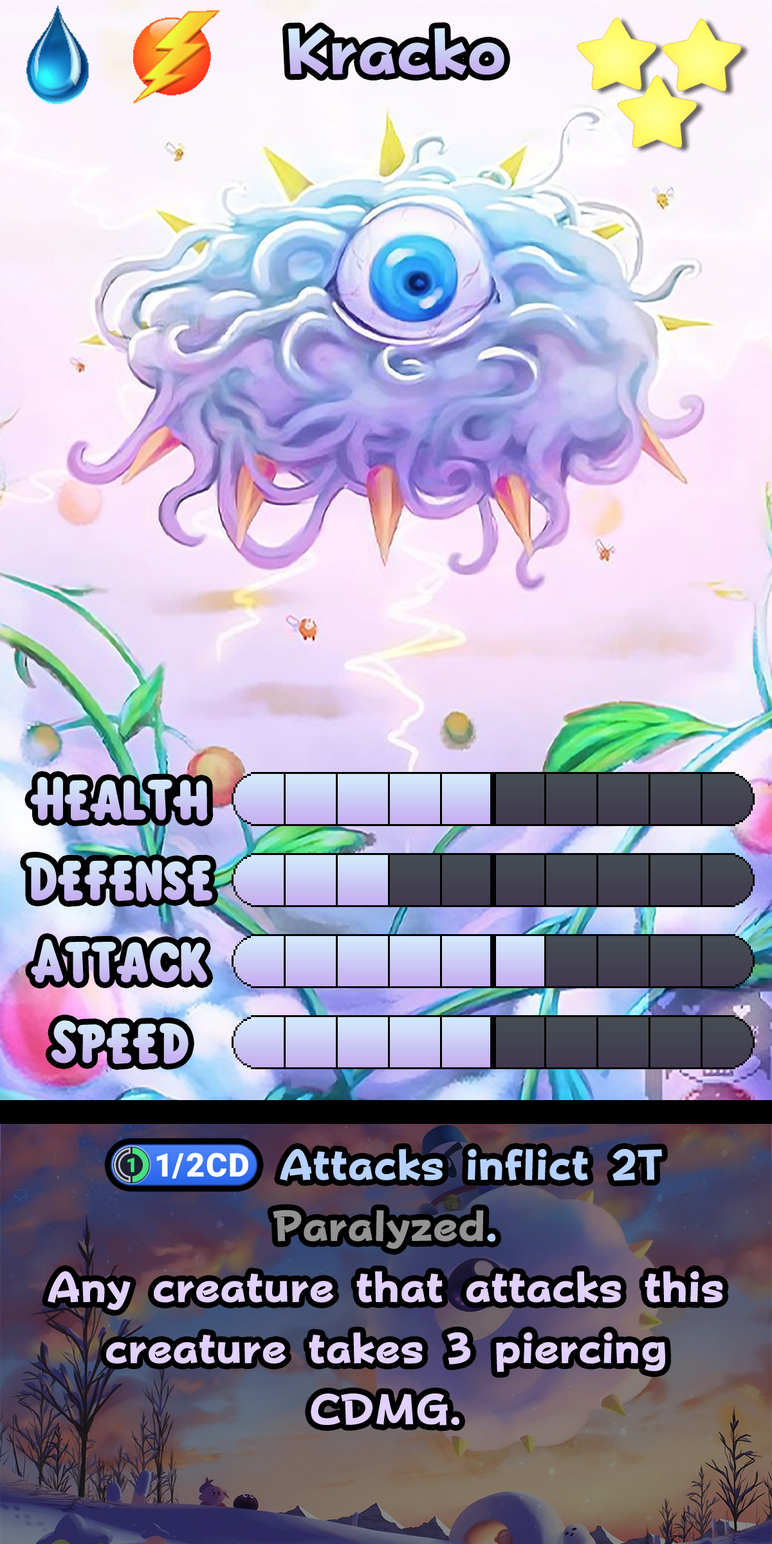
<style>
.page{position:relative;width:772px;height:1544px}
.page>*{position:absolute;margin:0}
.t1{font:110px "FOTPopHappinessStrp-ExtraBold";color:#cac4f4}
.t2{font:92.7px "KirbyClassic"}
.t3{font:73.4px/61.1px "FOTPopHappinessStrp-ExtraBold";color:#e1d1ff}
.t4{font:73.4px/61.1px "stoogedings-Regular";color:#b7d1ff}
.t5{font:73.4px/61.1px "FOTPopHappinessStrp-ExtraBold";color:#b7d1ff}
.t6{font:73.4px/61.1px "FOTPopHappinessStrp-ExtraBold";color:#939393}
</style>
<div class="page">
<p class="t1" style="left:288px;top:28px;width:216px;height:47px">Kracko</p>
<p class="t2" style="left:30px;top:777px;width:178px;height:44px">Health</p>
<p class="t2" style="left:26px;top:858px;width:186px;height:44px">Defense</p>
<p class="t2" style="left:31px;top:939px;width:176px;height:44px">Attack</p>
<p class="t2" style="left:51px;top:1021px;width:138px;height:43px">Speed</p>
<p class="t3" style="left:48px;top:1144px;width:675px;height:282px;text-align:center"><span class="t4">(1/2CD)</span><span class="t5"> Attacks inflict 2T </span><span class="t6">Paralyzed</span><span class="t5">. <br></span>Any creature that attacks this creature takes 3 piercing CDMG.</p>
</div>
